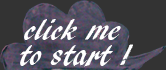
<style>
.page{position:relative;width:166px;height:70px;background:#333333}
.page>*{position:absolute;margin:0}
.t1{font:30px "ARBLANCA";color:#ffffff}
</style>
<div class="page">
<p class="t1" style="left:24px;top:19px;width:97px;height:21px">click me</p>
<p class="t1" style="left:20px;top:44px;width:113px;height:23px">to start !</p>
</div>
